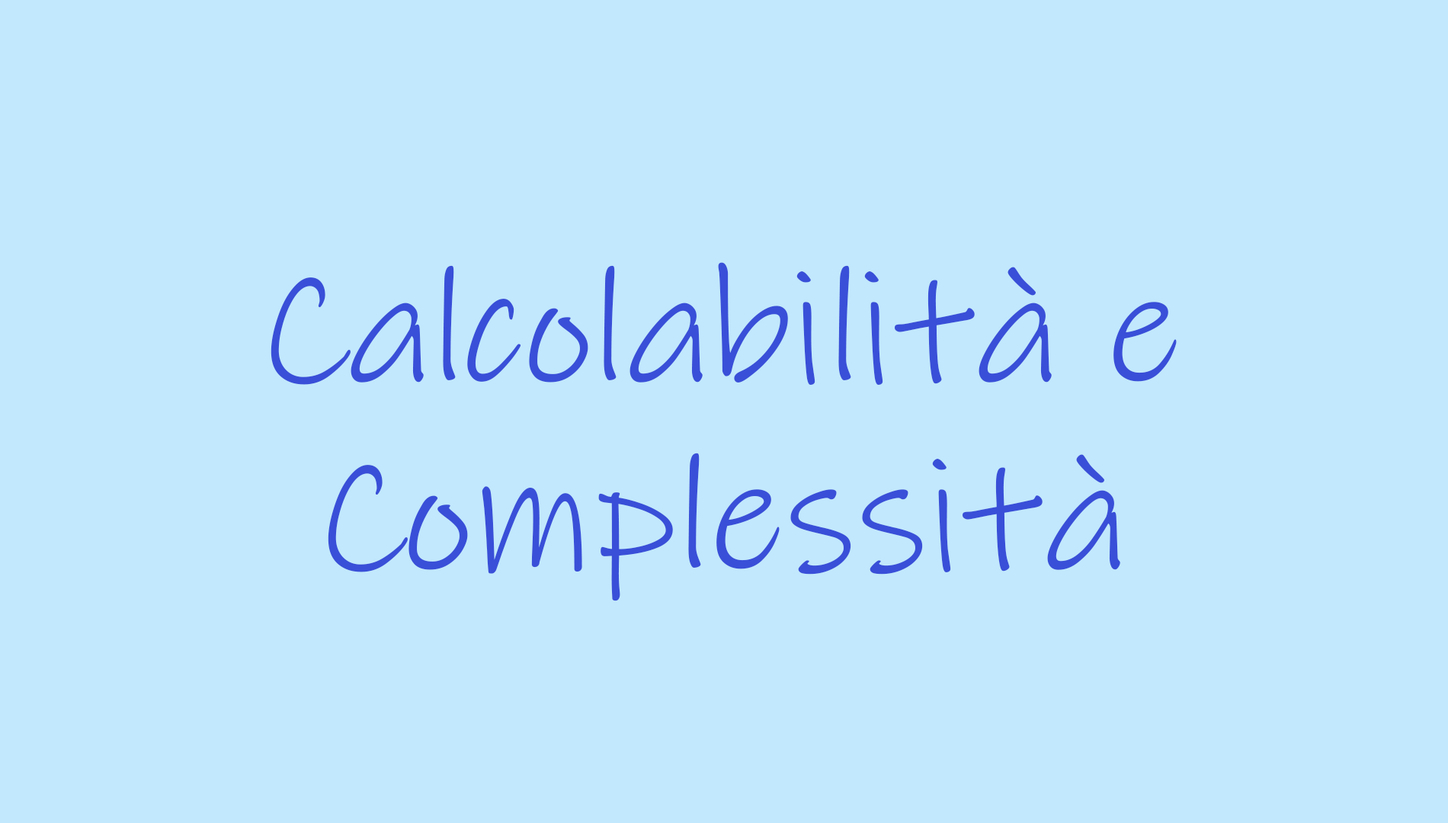
<style>
.page{position:relative;width:1448px;height:823px;background:#c1e8fc}
.page>*{position:absolute;margin:0}
.t1{font:161.4px "InkFree";color:#394fd8}
</style>
<div class="page">
<p class="t1" style="left:271px;top:262px;width:906px;height:123px">Calcolabilità e</p>
<p class="t1" style="left:328px;top:453px;width:793px;height:148px">Complessità</p>
</div>
